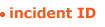
<style>
.page{position:relative;width:105px;height:27px;background:#ffffff}
.page>*{position:absolute;margin:0}
.t1{font:14px "Verdana-Bold";color:#f15b23}
</style>
<div class="page">
<p class="t1" style="left:10px;top:7px;width:86px;height:12px">incident ID</p>
</div>
